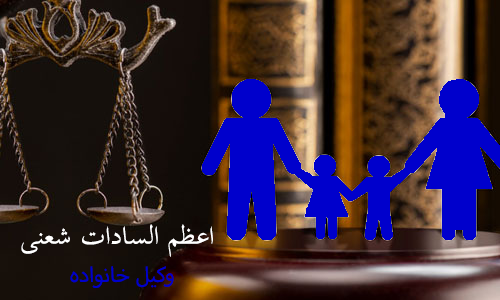
<style>
.page{position:relative;width:500px;height:300px}
.page>*{position:absolute;margin:0}
.t1{font:36px "TraditionalArabic";color:#ffffff}
.t2{font:30px "MyriadArabic-Regular";color:#0000cc}
</style>
<div class="page">
<p class="t1" style="left:21px;top:224px;width:192px;height:64px;text-align:center">اعظم السادات شعنی <br><span class="t2">وکیل خانواده</span></p>
</div>
